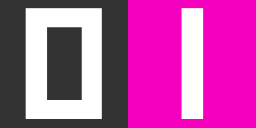
<style>
.page{position:relative;width:256px;height:128px;background:#f600bf}
.page>*{position:absolute;margin:0}
.t1{font:158.3px "SquareFont";color:#ffffff}
</style>
<div class="page">
<p class="t1" style="left:25px;top:8px;width:77px;height:111px">0</p>
<p class="t1" style="left:181px;top:8px;width:23px;height:111px">1</p>
</div>
